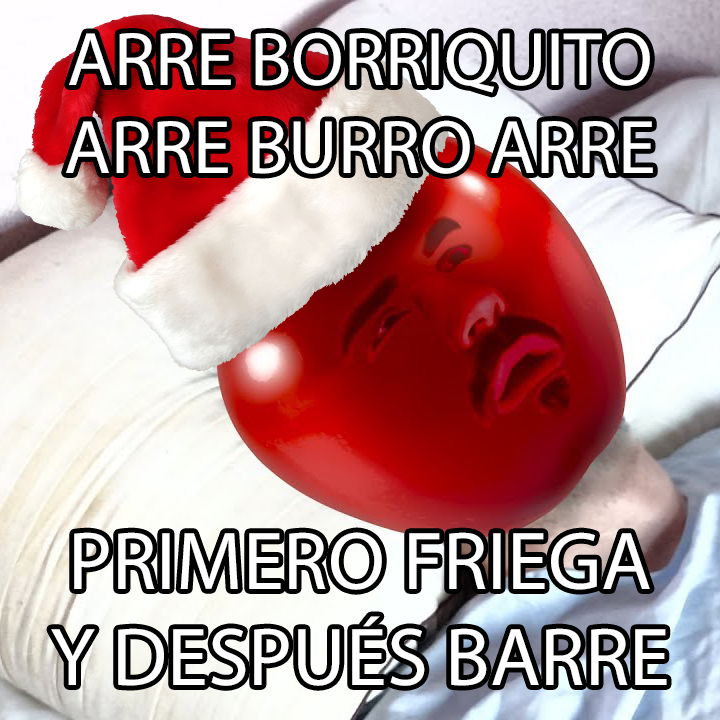
<style>
.page{position:relative;width:720px;height:720px}
.page>*{position:absolute;margin:0}
.t1{font:76.4px "MyriadPro-Regular";color:#ffffff}
.t2{font:82.7px "MyriadPro-Regular";color:#ffffff}
</style>
<div class="page">
<p class="t1" style="left:66px;top:32px;width:587px;height:142px;text-align:center">ARRE BORRIQUITO<br>ARRE BURRO ARRE</p>
<p class="t2" style="left:51px;top:532px;width:616px;height:154px;text-align:center">PRIMERO FRIEGA<br>Y DESPUÉS BARRE</p>
</div>
